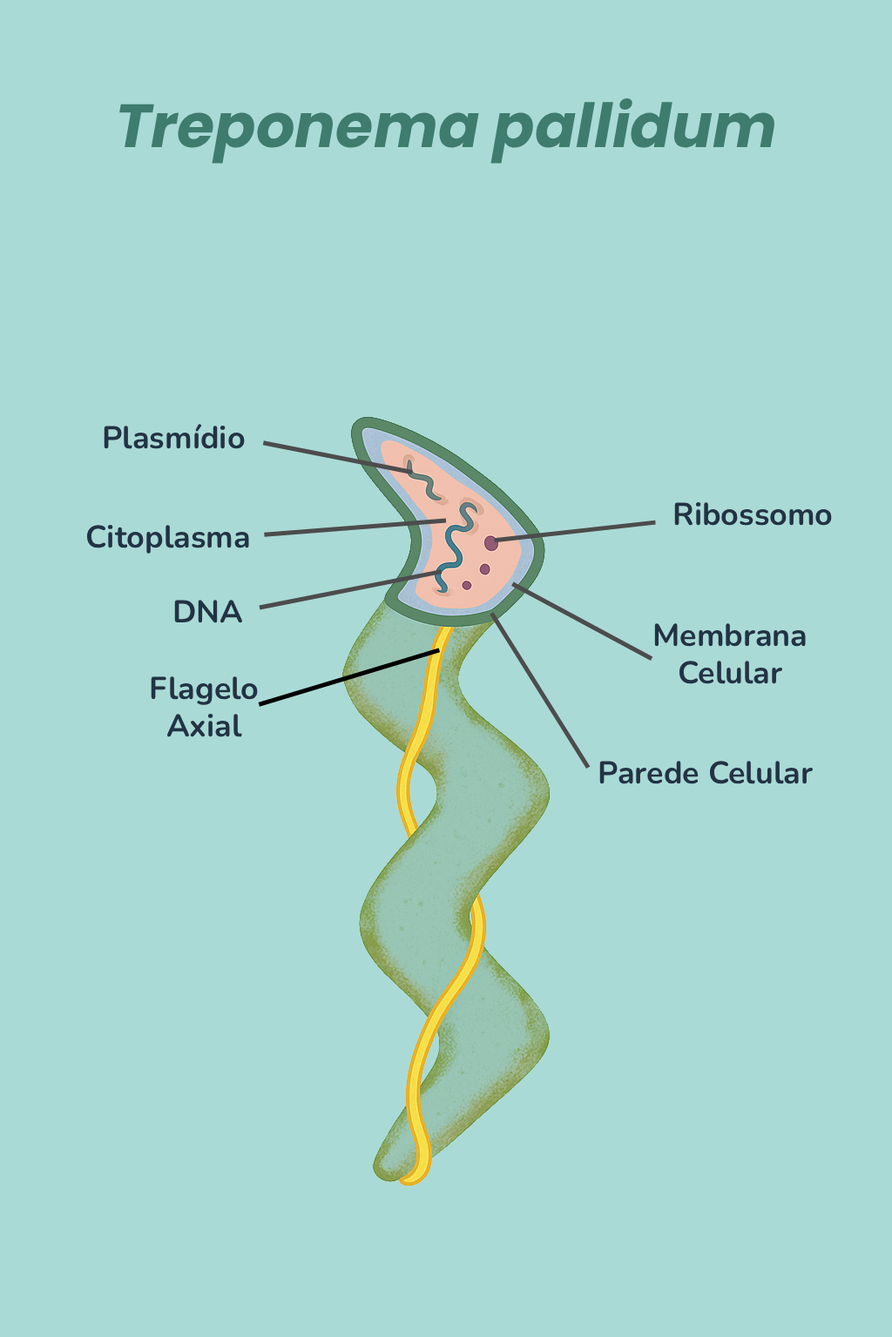
<style>
.page{position:relative;width:892px;height:1337px;background:#aadad6}
.page>*{position:absolute;margin:0}
.t1{font:60.9px "Poppins-BoldItalic";color:#3e7c6d}
.t2{font:31.3px "Nunito-Bold";color:#223344}
</style>
<div class="page">
<p class="t1" style="left:119px;top:98px;width:657px;height:66px">Treponema pallidum</p>
<p class="t2" style="left:104px;top:424px;width:141px;height:25px">Plasmídio</p>
<p class="t2" style="left:674px;top:502px;width:158px;height:24px">Ribossomo</p>
<p class="t2" style="left:86px;top:525px;width:163px;height:29px">Citoplasma</p>
<p class="t2" style="left:174px;top:600px;width:69px;height:23px">DNA</p>
<p class="t2" style="left:654px;top:623px;width:151px;height:61px;text-align:center">Membrana Celular</p>
<p class="t2" style="left:151px;top:677px;width:107px;height:60px;text-align:center">Flagelo Axial</p>
<p class="t2" style="left:599px;top:761px;width:214px;height:24px">Parede Celular</p>
</div>
